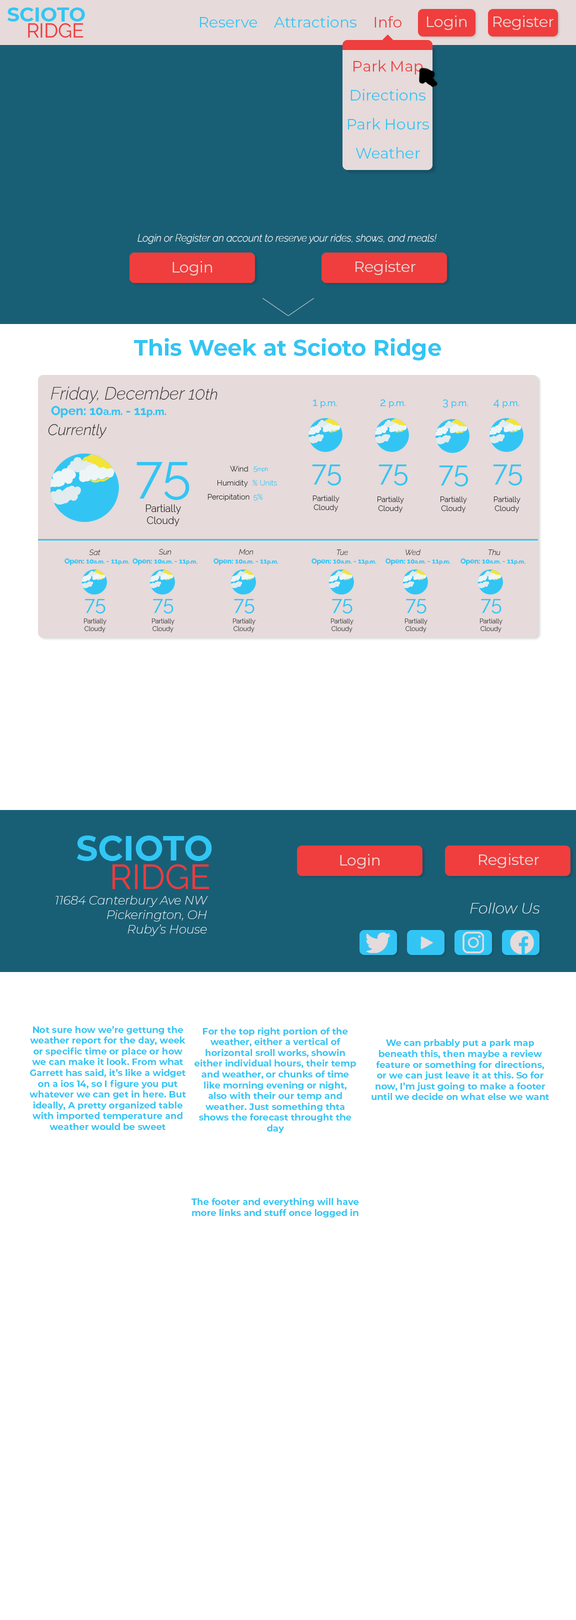
<style>
.page{position:relative;width:576px;height:1620px;background:#ffffff}
.page>*{position:absolute;margin:0}
.t1{font:15px "Montserrat-Regular";color:#32c5f4}
.t2{font:15px "Montserrat-Regular";color:#ef3e3d}
.t3{font:15px "Montserrat-Regular";color:#e6dada}
.t4{font:10px "RalewayItalic-ExtraLightItalic";color:#ffffff}
.t5{font:22.5px "Montserrat-Bold";color:#32c5f4}
.t6{font:17.5px "RalewayItalic-ExtraLightItalic";color:#222222}
.t7{font:15px "RalewayItalic-ExtraLightItalic";color:#222222}
.t8{font:9px "RalewayRoman-Regular";color:#32c5f4}
.t9{font:11px "RalewayRoman-Regular";color:#32c5f4}
.t10{font:12.5px "RalewayRoman-Bold";color:#32c5f4}
.t11{font:10px "RalewayRoman-Bold";color:#32c5f4}
.t12{font:52.5px "RalewayRoman-Regular";color:#32c5f4}
.t13{font:7.5px "Raleway-Light";color:#222222}
.t14{font:5px "Raleway-Light";color:#32c5f4}
.t15{font:7.5px "Raleway-Light";color:#32c5f4}
.t16{font:28.7px "RalewayRoman-Regular";color:#32c5f4}
.t17{font:10px "Raleway-Light";color:#222222}
.t18{font:7px "RalewayRoman-Bold";color:#32c5f4}
.t19{font:5.6px "RalewayRoman-Bold";color:#32c5f4}
.t20{font:7.5px "RalewayItalic-ExtraLightItalic";color:#222222}
.t21{font:20px "RalewayRoman-Regular";color:#32c5f4}
.t22{font:6.4px "Raleway-Light";color:#222222}
.t23{font:12.1px "Montserrat-ExtraLightItalic";color:#ffffff}
.t24{font:15px "Montserrat-ExtraLightItalic";color:#ffffff}
.t25{font:9px "Montserrat-Bold";color:#32c5f4}
</style>
<div class="page">
<p class="t1" style="left:200px;top:17px;width:57px;height:11px">Reserve</p>
<p class="t1" style="left:274px;top:16px;width:82px;height:12px">Attractions</p>
<p class="t2" style="left:374px;top:16px;width:28px;height:12px">Info</p>
<p class="t3" style="left:427px;top:16px;width:39px;height:14px">Login</p>
<p class="t3" style="left:494px;top:16px;width:60px;height:14px">Register</p>
<p class="t2" style="left:354px;top:60px;width:69px;height:14px">Park Map</p>
<p class="t1" style="left:350px;top:89px;width:76px;height:11px">Directions</p>
<p class="t1" style="left:348px;top:118px;width:81px;height:12px">Park Hours</p>
<p class="t1" style="left:356px;top:147px;width:64px;height:11px">Weather</p>
<p class="t4" style="left:138px;top:234px;width:298px;height:10px">Login or Register an account to reserve your rides, shows, and meals!</p>
<p class="t3" style="left:172px;top:261px;width:40px;height:15px">Login</p>
<p class="t3" style="left:356px;top:260px;width:60px;height:15px">Register</p>
<p class="t5" style="left:134px;top:338px;width:307px;height:22px">This Week at Scioto Ridge</p>
<p class="t6" style="left:51px;top:386px;width:167px;height:18px">Friday, December 10<span class="t7">th</span></p>
<p class="t8" style="left:313px;top:400px;width:24px;height:8px"><span class="t9">1 </span>p.m.</p>
<p class="t8" style="left:380px;top:399px;width:26px;height:9px"><span class="t9">2 </span>p.m.</p>
<p class="t8" style="left:442px;top:400px;width:26px;height:8px"><span class="t9">3 </span>p.m.</p>
<p class="t8" style="left:494px;top:400px;width:25px;height:8px"><span class="t9">4 </span>p.m.</p>
<p class="t10" style="left:51px;top:406px;width:115px;height:12px">Open: 10<span class="t11">a.m.</span> - 11<span class="t11">p.m.</span></p>
<p class="t7" style="left:48px;top:424px;width:58px;height:14px">Currently</p>
<p class="t12" style="left:136px;top:462px;width:54px;height:38px">75</p>
<p class="t13" style="left:230px;top:466px;width:18px;height:6px">Wind</p>
<p class="t14" style="left:254px;top:466px;width:14px;height:6px"><span class="t15">5</span>mph</p>
<p class="t16" style="left:312px;top:464px;width:30px;height:22px">75</p>
<p class="t16" style="left:378px;top:464px;width:30px;height:22px">75</p>
<p class="t16" style="left:439px;top:466px;width:29px;height:20px">75</p>
<p class="t16" style="left:493px;top:464px;width:29px;height:22px">75</p>
<p class="t13" style="left:218px;top:480px;width:30px;height:7px">Humidity</p>
<p class="t15" style="left:252px;top:480px;width:25px;height:6px">% Units</p>
<p class="t13" style="left:208px;top:494px;width:42px;height:7px">Percipitation</p>
<p class="t15" style="left:254px;top:494px;width:8px;height:6px">5%</p>
<p class="t13" style="left:313px;top:496px;width:27px;height:16px;text-align:center">Partially<br>Cloudy</p>
<p class="t13" style="left:378px;top:496px;width:26px;height:16px;text-align:center">Partially<br>Cloudy</p>
<p class="t13" style="left:440px;top:496px;width:27px;height:16px;text-align:center">Partially<br>Cloudy</p>
<p class="t13" style="left:494px;top:496px;width:26px;height:16px;text-align:center">Partially<br>Cloudy</p>
<p class="t17" style="left:146px;top:504px;width:35px;height:22px;text-align:center">Partially<br>Cloudy</p>
<p class="t18" style="left:64px;top:558px;width:66px;height:8px">Open: 10<span class="t19">a.m.</span> - 11<span class="t19">p.m.</span></p>
<p class="t20" style="left:89px;top:550px;width:11px;height:6px">Sat</p>
<p class="t18" style="left:132px;top:558px;width:66px;height:8px">Open: 10<span class="t19">a.m.</span> - 11<span class="t19">p.m.</span></p>
<p class="t20" style="left:158px;top:549px;width:14px;height:6px">Sun</p>
<p class="t18" style="left:214px;top:558px;width:64px;height:8px">Open: 10<span class="t19">a.m.</span> - 11<span class="t19">p.m.</span></p>
<p class="t20" style="left:239px;top:549px;width:15px;height:6px">Mon</p>
<p class="t18" style="left:312px;top:558px;width:64px;height:8px">Open: 10<span class="t19">a.m.</span> - 11<span class="t19">p.m.</span></p>
<p class="t20" style="left:336px;top:550px;width:12px;height:6px">Tue</p>
<p class="t18" style="left:386px;top:558px;width:64px;height:8px">Open: 10<span class="t19">a.m.</span> - 11<span class="t19">p.m.</span></p>
<p class="t20" style="left:406px;top:549px;width:15px;height:7px">Wed</p>
<p class="t18" style="left:460px;top:558px;width:66px;height:8px">Open: 10<span class="t19">a.m.</span> - 11<span class="t19">p.m.</span></p>
<p class="t20" style="left:488px;top:549px;width:12px;height:7px">Thu</p>
<p class="t21" style="left:85px;top:599px;width:21px;height:15px">75</p>
<p class="t21" style="left:153px;top:599px;width:21px;height:15px">75</p>
<p class="t21" style="left:234px;top:599px;width:20px;height:15px">75</p>
<p class="t21" style="left:332px;top:599px;width:20px;height:15px">75</p>
<p class="t21" style="left:406px;top:599px;width:20px;height:15px">75</p>
<p class="t21" style="left:481px;top:599px;width:21px;height:15px">75</p>
<p class="t22" style="left:84px;top:618px;width:22px;height:14px;text-align:center">Partially<br>Cloudy</p>
<p class="t22" style="left:152px;top:618px;width:22px;height:14px;text-align:center">Partially<br>Cloudy</p>
<p class="t22" style="left:233px;top:618px;width:23px;height:14px;text-align:center">Partially<br>Cloudy</p>
<p class="t22" style="left:331px;top:618px;width:23px;height:14px;text-align:center">Partially<br>Cloudy</p>
<p class="t22" style="left:405px;top:618px;width:23px;height:14px;text-align:center">Partially<br>Cloudy</p>
<p class="t22" style="left:480px;top:618px;width:22px;height:14px;text-align:center">Partially<br>Cloudy</p>
<p class="t3" style="left:340px;top:854px;width:40px;height:14px">Login</p>
<p class="t3" style="left:479px;top:854px;width:60px;height:14px">Register</p>
<p class="t23" style="left:56px;top:896px;width:152px;height:40px;text-align:right">11684 Canterbury Ave NW<br>Pickerington, OH<br>Ruby’s House</p>
<p class="t24" style="left:470px;top:902px;width:70px;height:12px">Follow Us</p>
<p class="t25" style="left:30px;top:1026px;width:156px;height:104px;text-align:center">Not sure how we’re gettung the weather report for the day, week or specific time or place or how we can make it look. From what Garrett has said, it’s like a widget on a ios 14, so I figure you put whatever we can get in here. But ideally, A pretty organized table with imported temperature and weather would be sweet</p>
<p class="t25" style="left:194px;top:1027px;width:162px;height:106px;text-align:center">For the top right portion of the weather, either a vertical of horizontal sroll works, showin either individual hours, their temp and weather, or chunks of time like morning evening or night, also with their our temp and weather. Just something thta shows the forecast throught the day</p>
<p class="t25" style="left:372px;top:1039px;width:177px;height:61px;text-align:center">We can prbably put a park map beneath this, then maybe a review feature or something for directions, or we can just leave it at this. So for now, I’m just going to make a footer until we decide on what else we want</p>
<p class="t25" style="left:192px;top:1198px;width:167px;height:20px;text-align:center">The footer and everything will have more links and stuff once logged in</p>
</div>
